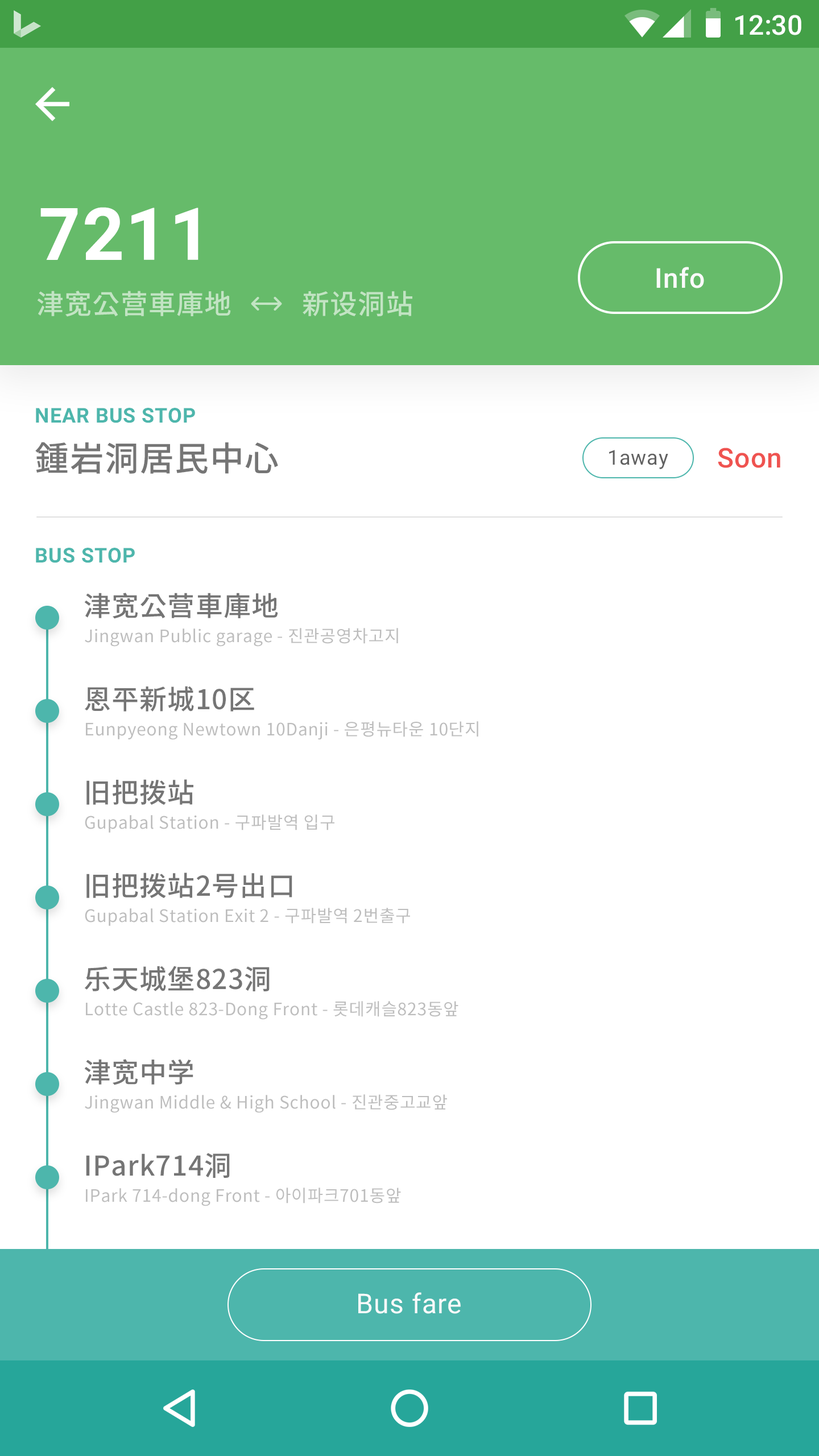
<style>
.page{position:relative;width:819px;height:1456px;background:#ffffff}
.page>*{position:absolute;margin:0}
.t1{font:27.3px "Roboto-Medium";color:#ffffff}
.t2{font:72.8px "Roboto-Bold";letter-spacing:0.025em;color:#ffffff}
.t3{font:27.3px "Roboto-Medium";letter-spacing:0.025em;color:#fafafa}
.t4{font:27.3px "NotoSansCJKkr-Medium";letter-spacing:0.025em;color:#c2e4c3}
.t5{font:20.5px "Roboto-Bold";letter-spacing:0.025em;color:#4db6ac}
.t6{font:34.1px "NotoSansCJKkr-Medium";letter-spacing:0.025em;color:#757575}
.t7{font:20.5px "Roboto-Regular";letter-spacing:0.025em;color:#616161}
.t8{font:27.3px "Roboto-Medium";letter-spacing:0.025em;color:#ef5350}
.t9{font:27.3px "NotoSansCJKkr-Medium";letter-spacing:0.025em;color:#757575}
.t10{font:17.1px "NotoSansCJKkr-Regular";letter-spacing:0.025em;color:#bdbdbd}
.t11{font:27.3px "Roboto-Regular";letter-spacing:0.025em;color:#fafafa}
</style>
<div class="page">
<p class="t1" style="left:735px;top:15px;width:66px;height:20px">12:30</p>
<p class="t2" style="left:40px;top:207px;width:158px;height:53px">7211</p>
<p class="t3" style="left:656px;top:267px;width:48px;height:21px">Info</p>
<p class="t4" style="left:37px;top:291px;width:194px;height:26px">津宽公营車庫地</p>
<p class="t4" style="left:303px;top:291px;width:109px;height:25px">新设洞站</p>
<p class="t5" style="left:36px;top:408px;width:159px;height:15px">NEAR BUS STOP</p>
<p class="t6" style="left:35px;top:442px;width:243px;height:32px">鍾岩洞居民中心</p>
<p class="t7" style="left:609px;top:450px;width:59px;height:19px">1away</p>
<p class="t8" style="left:718px;top:448px;width:62px;height:20px">Soon</p>
<p class="t5" style="left:36px;top:548px;width:99px;height:15px">BUS STOP</p>
<p class="t9" style="left:84px;top:593px;width:194px;height:26px">津宽公营車庫地</p>
<p class="t10" style="left:85px;top:628px;width:313px;height:19px">Jingwan Public garage - 진관공영차고지</p>
<p class="t9" style="left:85px;top:686px;width:169px;height:25px">恩平新城10区</p>
<p class="t10" style="left:86px;top:721px;width:392px;height:19px">Eunpyeong Newtown 10Danji - 은평뉴타운 10단지</p>
<p class="t9" style="left:86px;top:779px;width:107px;height:26px">旧把拨站</p>
<p class="t10" style="left:85px;top:814px;width:249px;height:19px">Gupabal Station - 구파발역 입구</p>
<p class="t9" style="left:86px;top:872px;width:206px;height:26px">旧把拨站2号出口</p>
<p class="t10" style="left:85px;top:908px;width:325px;height:18px">Gupabal Station Exit 2 - 구파발역 2번출구</p>
<p class="t9" style="left:84px;top:966px;width:186px;height:25px">乐天城堡823洞</p>
<p class="t10" style="left:86px;top:1001px;width:372px;height:19px">Lotte Castle 823-Dong Front - 롯데캐슬823동앞</p>
<p class="t9" style="left:84px;top:1059px;width:109px;height:26px">津宽中学</p>
<p class="t10" style="left:85px;top:1094px;width:362px;height:19px">Jingwan Middle &amp; High School - 진관중고교앞</p>
<p class="t9" style="left:86px;top:1153px;width:144px;height:25px">IPark714洞</p>
<p class="t10" style="left:86px;top:1188px;width:315px;height:18px">IPark 714-dong Front - 아이파크701동앞</p>
<p class="t11" style="left:358px;top:1292px;width:103px;height:22px">Bus fare</p>
</div>
